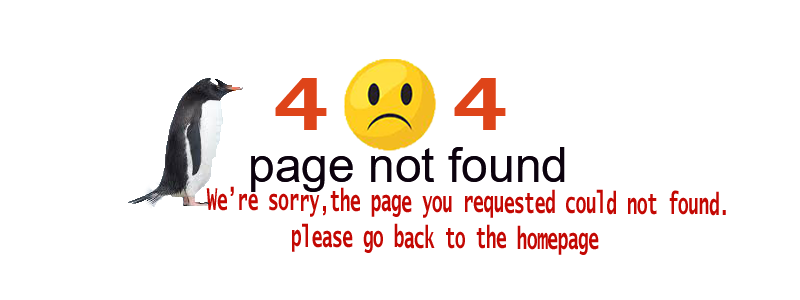
<style>
.page{position:relative;width:800px;height:300px;background:#ffffff}
.page>*{position:absolute;margin:0}
.t1{font:72px "LucidaSans-TypewriterBold";color:#de4419;scale:1.37 1}
.t2{font:48px "ArialMT";color:#0c020e}
.t3{font:48px "BookAntiqua-Bold";color:#0c020e}
.t4{font:30px "LucidaSans-TypewriterBold";color:#c30803;scale:0.58 1}
.t5{font:24.1px "LucidaSans-TypewriterBold";color:#070707;scale:0.58 1}
</style>
<div class="page">
<p class="t1" style="left:275px;top:78px;width:231px;height:52px">4  4</p>
<p class="t2" style="left:251px;top:147px;width:314px;height:45px"><span class="t3">         </span>page not found</p>
<p class="t4" style="left:206px;top:186px;width:520px;height:69px;text-align:center;rotate:1deg"><span class="t5">                             </span>We’re sorry,the page you requested could not found.<br>                   please go back to the homepage</p>
</div>
